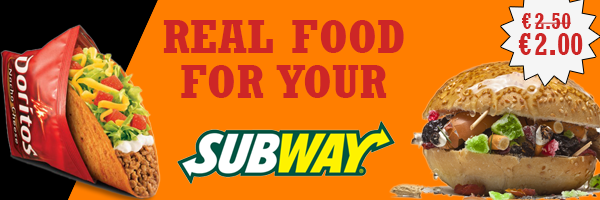
<style>
.page{position:relative;width:600px;height:200px;background:#ff7e00}
.page>*{position:absolute;margin:0}
.t1{font:23px/26px "Rockwell-CondensedBold";color:#cd2626}
.t2{font:31px/26px "Rockwell-CondensedBold";color:#cd2626}
.t3{font:45.6px/45.6px "Rockwell-CondensedBold";color:#cd2626;scale:1.15 1}
</style>
<div class="page">
<p class="t1" style="left:518px;top:13px;width:65px;height:42px;text-align:center">€2.50<br><span class="t2">€2.00</span></p>
<p class="t3" style="left:163px;top:20px;width:241px;height:78px;text-align:center">REAL FOOD<br>FOR YOUR</p>
</div>
